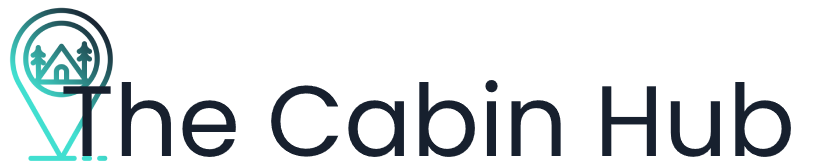
<style>
.page{position:relative;width:813px;height:166px;background:#ffffff}
.page>*{position:absolute;margin:0}
.t1{font:100px "Poppins-Regular";color:#17202e}
</style>
<div class="page">
<p class="t1" style="left:63px;top:79px;width:728px;height:78px">The Cabin Hub</p>
</div>
